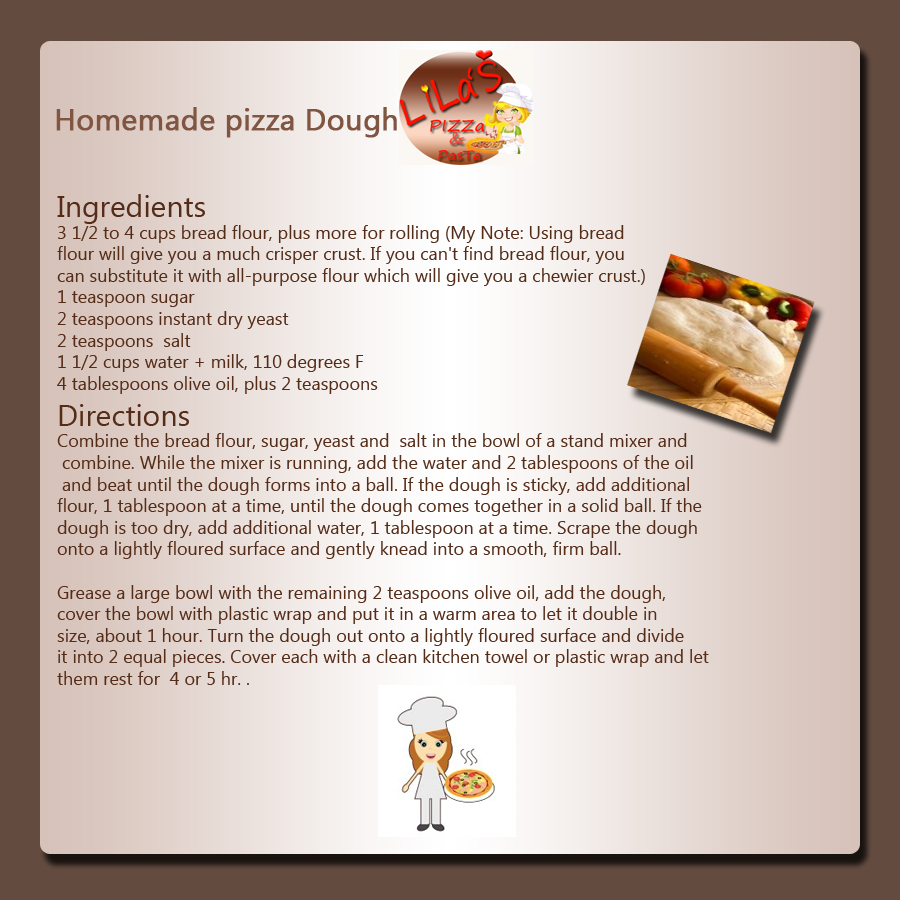
<style>
.page{position:relative;width:900px;height:900px}
.page>*{position:absolute;margin:0}
.t1{font:30px "SegoeUISymbol";color:#805642;font-weight:bold}
.t2{font:18px "SegoeUISymbol";color:#552c18}
.t3{font:48px "SegoeUISymbol";color:#552c18}
.t4{font:30px "SegoeUISymbol";color:#552c18}
</style>
<div class="page">
<p class="t1" style="left:56px;top:107px;width:341px;height:31px">Homemade pizza Dough</p>
<p class="t2" style="left:57px;top:194px;width:652px;height:491px"><span class="t3"><br></span><span class="t4"><br>Ingredients <br></span>3 1/2 to 4 cups bread flour, plus more for rolling (My Note: Using bread <br>flour will give you a much crisper crust. If you can't find bread flour, you <br>can substitute it with all-purpose flour which will give you a chewier crust.)<br>1 teaspoon sugar<br>2 teaspoons instant dry yeast<br>2 teaspoons  salt<br>1 1/2 cups water + milk, 110 degrees F<br>4 tablespoons olive oil, plus 2 teaspoons<br><span class="t4">Directions<br></span>Combine the bread flour, sugar, yeast and  salt in the bowl of a stand mixer and<br> combine. While the mixer is running, add the water and 2 tablespoons of the oil<br> and beat until the dough forms into a ball. If the dough is sticky, add additional <br>flour, 1 tablespoon at a time, until the dough comes together in a solid ball. If the <br>dough is too dry, add additional water, 1 tablespoon at a time. Scrape the dough <br>onto a lightly floured surface and gently knead into a smooth, firm ball.<br><br>Grease a large bowl with the remaining 2 teaspoons olive oil, add the dough, <br>cover the bowl with plastic wrap and put it in a warm area to let it double in <br>size, about 1 hour. Turn the dough out onto a lightly floured surface and divide<br>it into 2 equal pieces. Cover each with a clean kitchen towel or plastic wrap and let <br>them rest for  4 or 5 hr. .</p>
</div>
